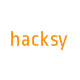
<style>
.page{position:relative;width:80px;height:80px;background:#ffffff}
.page>*{position:absolute;margin:0}
.t1{font:22px "RopaSans-Regular";color:#f89406}
</style>
<div class="page">
<p class="t1" style="left:11px;top:31px;width:57px;height:19px">hacksy</p>
</div>
